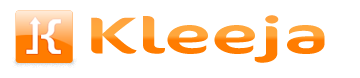
<style>
.page{position:relative;width:360px;height:78px;background:#ffffff}
.page>*{position:absolute;margin:0}
.t1{font:52px "Cocon-Regular";scale:1.62 1}
</style>
<div class="page">
<p class="t1" style="left:91px;top:15px;width:234px;height:48px">Kleeja</p>
</div>
